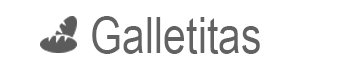
<style>
.page{position:relative;width:353px;height:72px;background:#ffffff}
.page>*{position:absolute;margin:0}
.t1{font:50px "ArialNarrow";color:#626262}
</style>
<div class="page">
<p class="t1" style="left:92px;top:16px;width:168px;height:38px">Galletitas</p>
</div>
